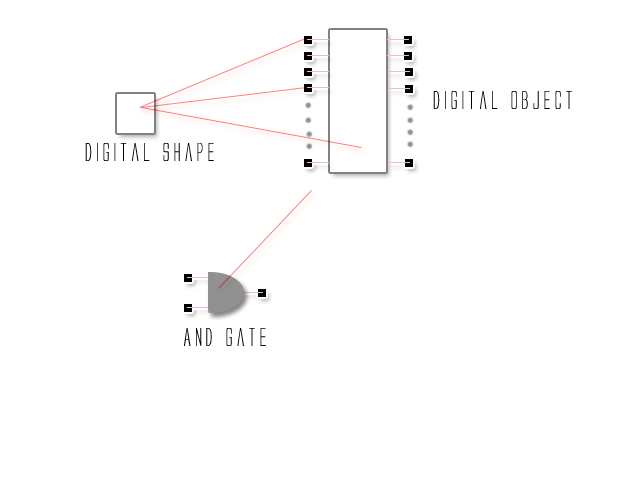
<style>
.page{position:relative;width:640px;height:480px;background:#ffffff}
.page>*{position:absolute;margin:0}
.t1{font:24px "AlienLeague";color:#000000}
</style>
<div class="page">
<p class="t1" style="left:433px;top:91px;width:139px;height:18px">Digital Object</p>
<p class="t1" style="left:85px;top:143px;width:129px;height:18px">Digital Shape</p>
<p class="t1" style="left:183px;top:328px;width:83px;height:18px">And Gate</p>
</div>
